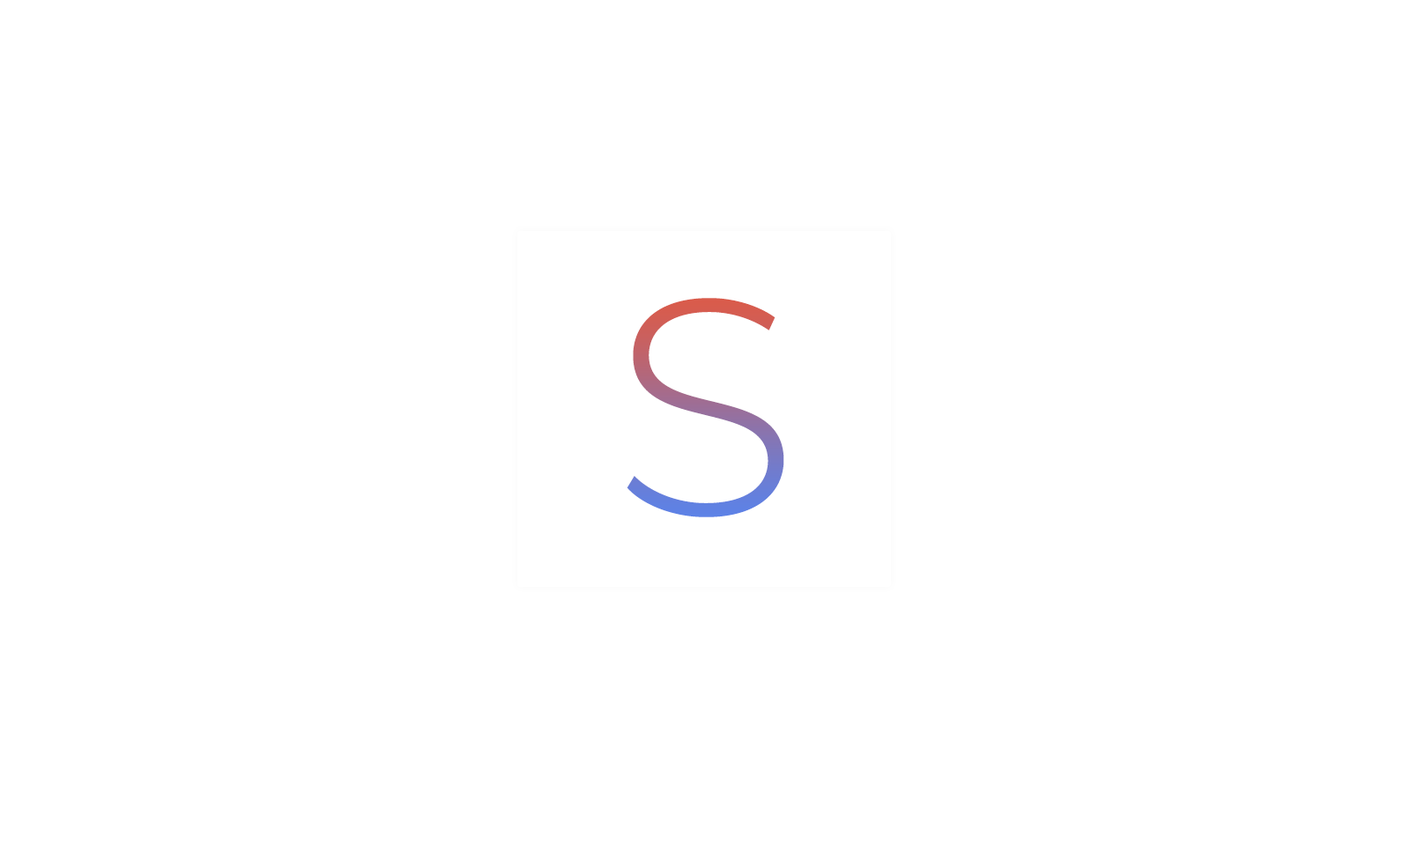
<style>
.page{position:relative;width:1410px;height:846px;background:#ffffff}
.page>*{position:absolute;margin:0}
.t1{font:308.4px "Montserrat-Light"}
</style>
<div class="page">
<p class="t1" style="left:626px;top:298px;width:158px;height:219px">S</p>
</div>
